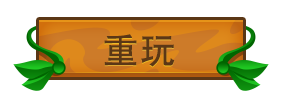
<style>
.page{position:relative;width:287px;height:103px;background:#ffffff}
.page>*{position:absolute;margin:0}
.t1{font:36px "AdobeHeitiStd-Regular";letter-spacing:0.025em;color:#5b3716}
</style>
<div class="page">
<p class="t1" style="left:104px;top:34px;width:71px;height:33px">重玩</p>
</div>
